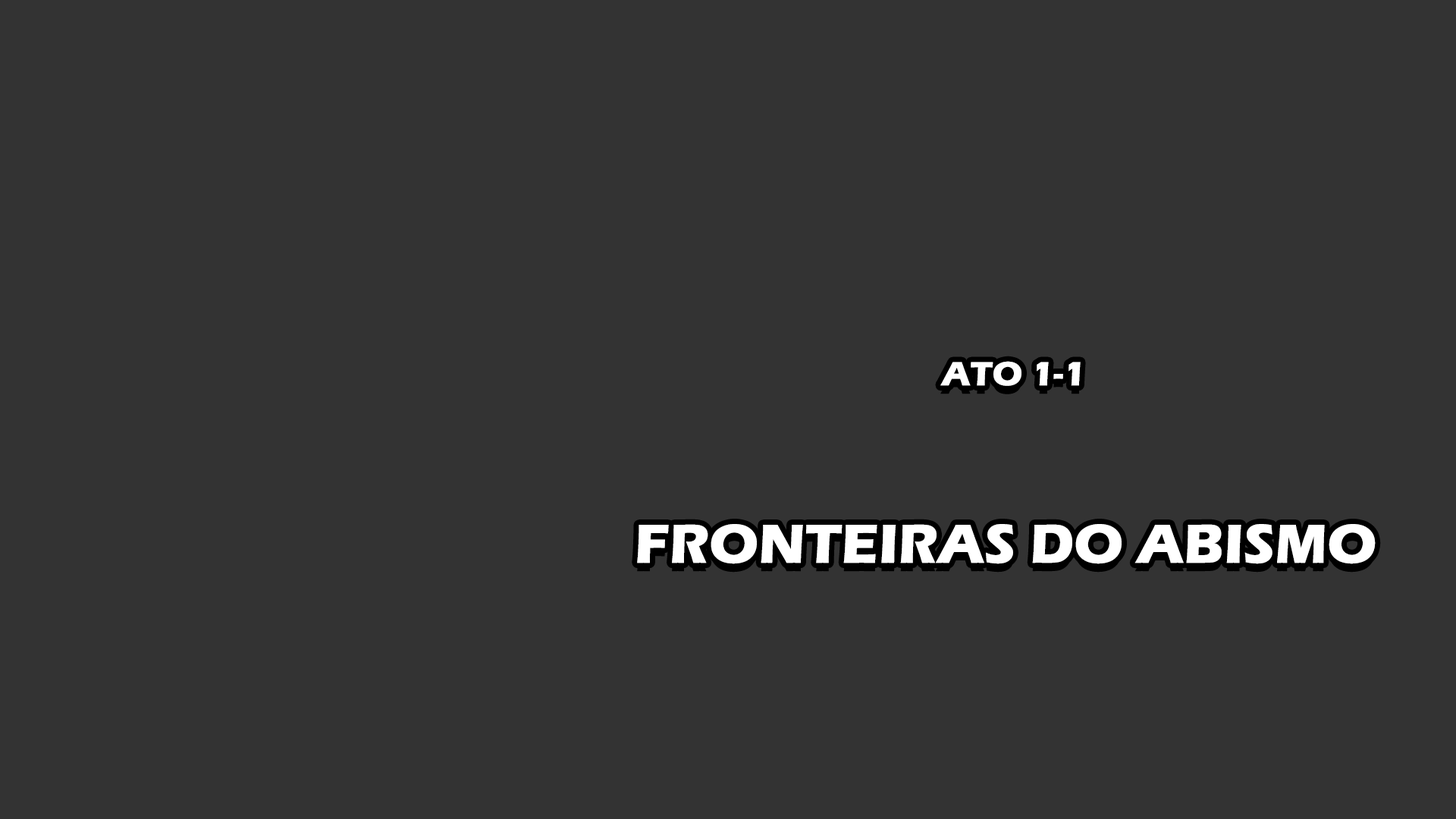
<style>
.page{position:relative;width:1456px;height:819px;background:#333333}
.page>*{position:absolute;margin:0}
.t1{font:34.8px "ErasITC-Bold";color:#ffffff}
.t2{font:56.9px "ErasITC-Bold";color:#ffffff}
</style>
<div class="page">
<p class="t1" style="left:940px;top:361px;width:141px;height:25px">ATO 1-1</p>
<p class="t2" style="left:637px;top:524px;width:739px;height:40px"><span class="t1"><br></span>FRONTEIRAS DO ABISMO</p>
</div>
